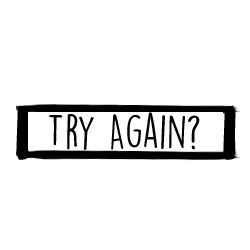
<style>
.page{position:relative;width:250px;height:250px;background:#ffffff}
.page>*{position:absolute;margin:0}
.t1{font:43.1px "DKLemonYellowSun";color:#000000}
</style>
<div class="page">
<p class="t1" style="left:49px;top:112px;width:151px;height:38px">Try Again?</p>
</div>
